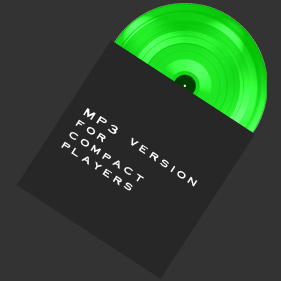
<style>
.page{position:relative;width:281px;height:281px;background:#333333}
.page>*{position:absolute;margin:0}
.t1{font:11px "Cornerstone";letter-spacing:0.32em;color:#ffffff;scale:1.18 1}
</style>
<div class="page">
<p class="t1" style="left:61px;top:108px;width:137px;height:83px;rotate:33deg">MP3 version<br>for<br>compact<br>players</p>
</div>
